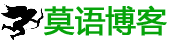
<style>
.page{position:relative;width:178px;height:42px;background:#ffffff}
.page>*{position:absolute;margin:0}
.t1{font:30px "MicrosoftYaHei";color:#06a30a;font-weight:bold}
</style>
<div class="page">
<p class="t1" style="left:44px;top:5px;width:123px;height:31px">莫语博客</p>
</div>
